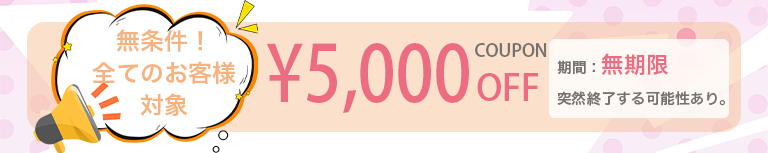
<style>
.page{position:relative;width:768px;height:153px;background:#ffffff}
.page>*{position:absolute;margin:0}
.t1{font:24px/32px "HiraKakuPro-W6";color:#f6b37f}
.t2{font:77.6px "AdobeHeitiStd-Regular";color:#ec6c81;scale:0.87 1}
.t3{font:18px "AdobeHeitiStd-Regular";color:#74716f}
.t4{font:14.7px/38.4px "HiraKakuPro-W6";color:#74716f}
.t5{font:22.5px/38.4px "HiraKakuPro-W6";color:#ec6c81}
.t6{font:36px "AdobeHeitiStd-Regular";color:#ec6c81}
</style>
<div class="page">
<p class="t1" style="left:92px;top:29px;width:144px;height:87px;text-align:center">無条件！<br>全てのお客様<br>対象</p>
<p class="t2" style="left:266px;top:43px;width:203px;height:70px">¥5,000</p>
<p class="t3" style="left:475px;top:43px;width:72px;height:14px">COUPON</p>
<p class="t4" style="left:557px;top:53px;width:168px;height:53px">期間：<span class="t5">無期限<br></span>突然終了する可能性あり。</p>
<p class="t6" style="left:477px;top:73px;width:61px;height:28px">OFF</p>
</div>
